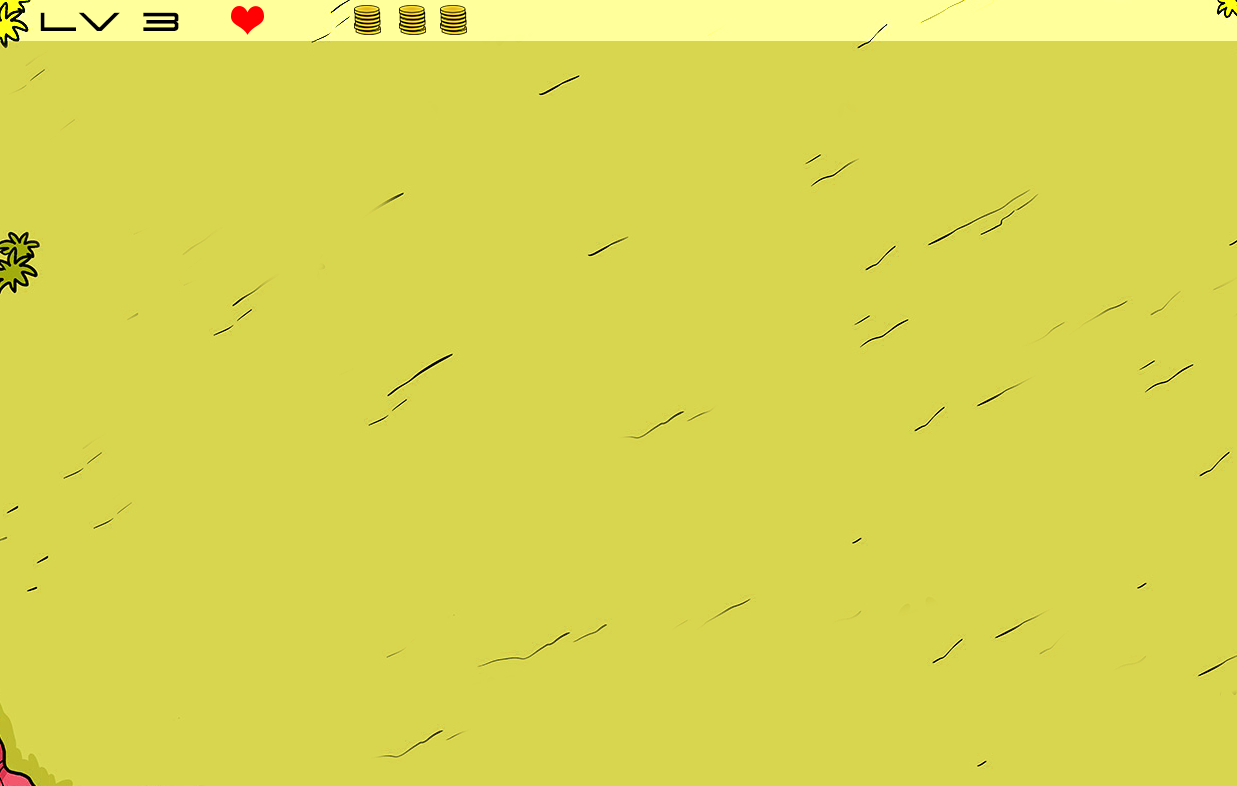
<style>
.page{position:relative;width:1237px;height:786px;background:#d8d54e}
.page>*{position:absolute;margin:0}
.t1{font:30px "SK-Porsche";color:#000000;font-variant:small-caps}
</style>
<div class="page">
<p class="t1" style="left:40px;top:12px;width:139px;height:19px">LV 3</p>
</div>
